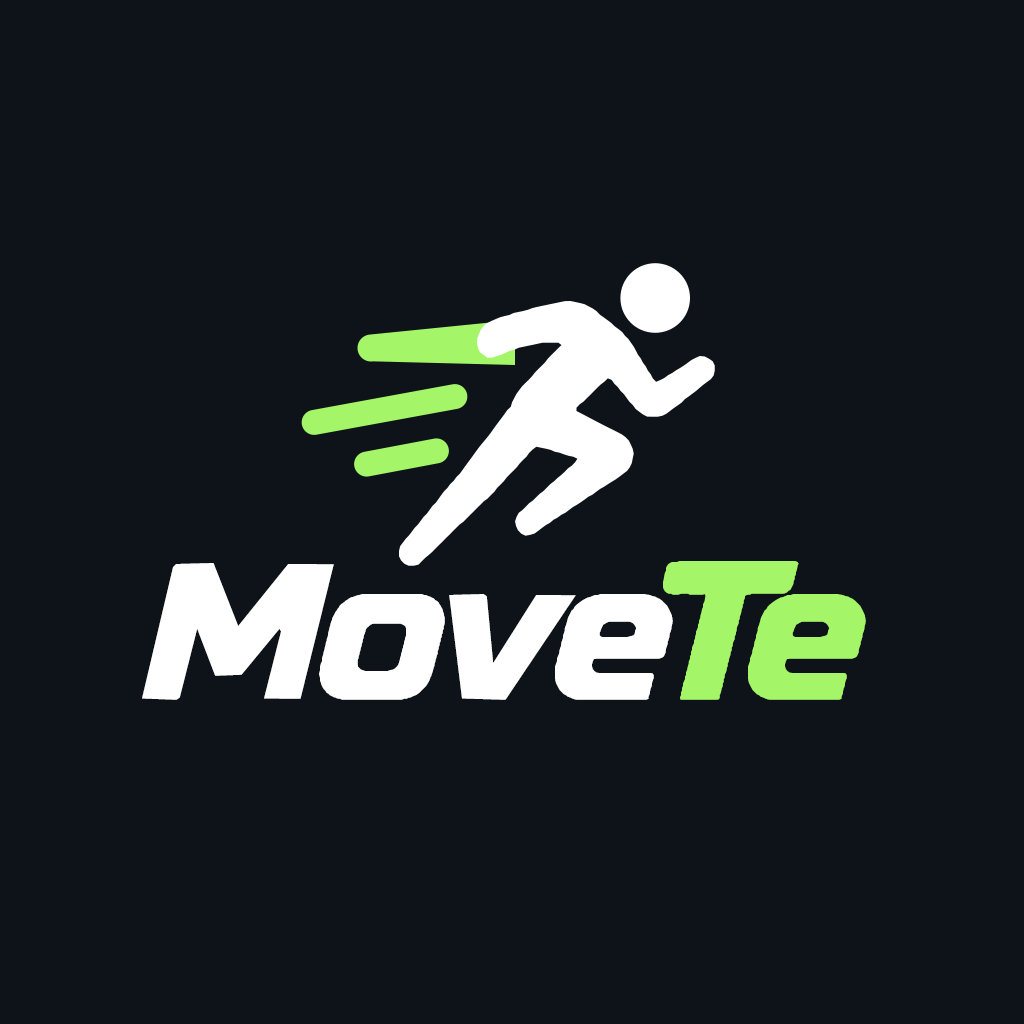
<style>
.page{position:relative;width:1024px;height:1024px;background:#0e1319}
.page>*{position:absolute;margin:0}
.t1{font:100px "MoveTe-BoldItalic";color:#ffffff}
.t2{font:100px "MoveTe-BoldItalic";letter-spacing:0.185em;color:#a4f568}
</style>
<div class="page">
<p class="t1" style="left:142px;top:563px;width:531px;height:137px">Move</p>
<p class="t2" style="left:663px;top:561px;width:203px;height:139px">Te</p>
</div>
